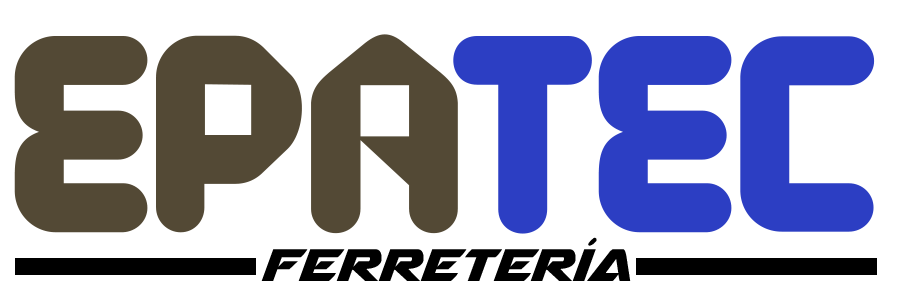
<style>
.page{position:relative;width:900px;height:300px;background:#ffffff}
.page>*{position:absolute;margin:0}
.t1{font:280px "File";color:#534935}
.t2{font:280px "File";color:#2c3ec3}
.t3{font:60px "Airstrike";color:#000000}
</style>
<div class="page">
<p class="t1" style="left:14px;top:34px;width:861px;height:200px">EPA<span class="t2">TEC</span></p>
<p class="t3" style="left:261px;top:237px;width:370px;height:44px">Ferretería</p>
</div>
